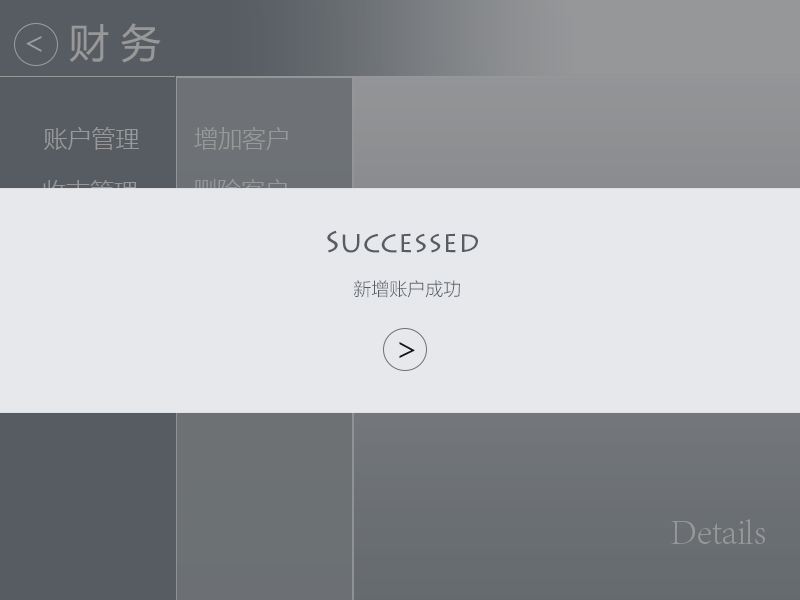
<style>
.page{position:relative;width:800px;height:600px;background:#e6e8ec}
.page>*{position:absolute;margin:0}
.t1{font:39.9px "MicrosoftYaHei";color:#989898}
.t2{font:24px "MicrosoftYaHeiLight";color:#989898}
.t3{font:30px "LithosPro-Regular";color:#565c62}
.t4{font:18px "MicrosoftYaHeiLight";color:#565c62}
.t5{font:36px "AdobeSongStd-Light";color:#989898}
</style>
<div class="page">
<p class="t1" style="left:69px;top:23px;width:92px;height:40px">财 务</p>
<p class="t2" style="left:44px;top:127px;width:95px;height:23px">账户管理</p>
<p class="t2" style="left:194px;top:127px;width:94px;height:23px">增加客户</p>
<p class="t3" style="left:327px;top:230px;width:151px;height:23px">Successed</p>
<p class="t4" style="left:353px;top:280px;width:107px;height:18px">新增账户成功</p>
<p class="t5" style="left:671px;top:519px;width:94px;height:25px">Details</p>
</div>
